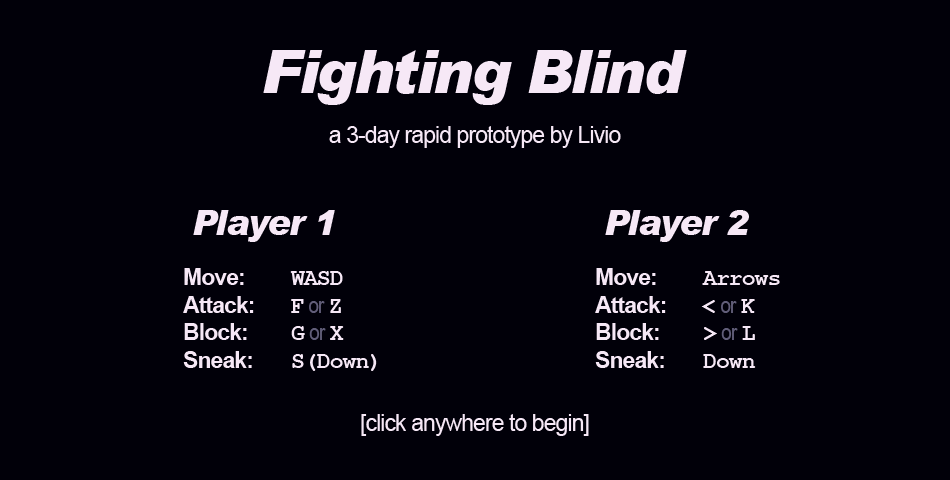
<style>
.page{position:relative;width:950px;height:480px;background:#010009}
.page>*{position:absolute;margin:0}
.t1{font:60px "Arial-BlackItalic";letter-spacing:-0.04em;color:#f6e8f6}
.t2{font:23px "ArialMT";letter-spacing:-0.04em;color:#f6e8f6}
.t3{font:35px "Arial-BlackItalic";letter-spacing:-0.04em;color:#f6e8f6}
.t4{font:23px "Arial-BoldMT";letter-spacing:-0.04em;color:#f6e8f6}
.t5{font:23px "CourierNewPS-BoldMT";letter-spacing:-0.04em;color:#f6e8f6}
.t6{font:23px "ArialNarrow";letter-spacing:-0.04em;color:#625e79}
.t7{font:23px "ArialNarrow";letter-spacing:-0.04em;color:#615e79}
</style>
<div class="page">
<p class="t1" style="left:263px;top:50px;width:424px;height:55px">Fighting Blind</p>
<p class="t2" style="left:329px;top:126px;width:292px;height:22px">a 3-day rapid prototype by Livio</p>
<p class="t3" style="left:193px;top:210px;width:142px;height:32px">Player 1</p>
<p class="t3" style="left:605px;top:210px;width:144px;height:32px">Player 2</p>
<p class="t4" style="left:183px;top:268px;width:194px;height:103px">Move:   <span class="t5">WASD<br></span>Attack: <span class="t5">F </span><span class="t6">or </span><span class="t5">Z<br></span>Block:   <span class="t5">G </span><span class="t7">or </span><span class="t5">X<br></span>Sneak:   <span class="t5">S(Down)</span></p>
<p class="t4" style="left:595px;top:268px;width:185px;height:100px">Move:   <span class="t5">Arrows<br></span>Attack: <span class="t5">&lt; </span><span class="t6">or </span><span class="t5">K<br></span>Block:   <span class="t5">&gt; </span><span class="t7">or </span><span class="t5">L<br></span>Sneak:   <span class="t5">Down</span></p>
<p class="t2" style="left:361px;top:414px;width:228px;height:22px">[click anywhere to begin]</p>
</div>
